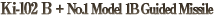
<style>
.page{position:relative;width:214px;height:18px;background:#ffffff}
.page>*{position:absolute;margin:0}
.t1{font:14px "RyuminPro-ExBold";letter-spacing:-0.12em;color:#4a3f32;font-weight:bold;scale:0.9 1}
.t2{font:16px "RyuminPro-ExBold";letter-spacing:-0.08em;color:#4a3f32;font-weight:bold;scale:0.9 1}
.t3{font:14px "RyuminPro-ExBold";letter-spacing:-0.08em;color:#4a3f32;font-weight:bold;scale:0.9 1}
</style>
<div class="page">
<p class="t1" style="left:0px;top:2px;width:214px;height:13px"><span class="t2">Ki-102 B </span><span class="t3">+ </span>No.1 Model 1B Guided Missile</p>
</div>
